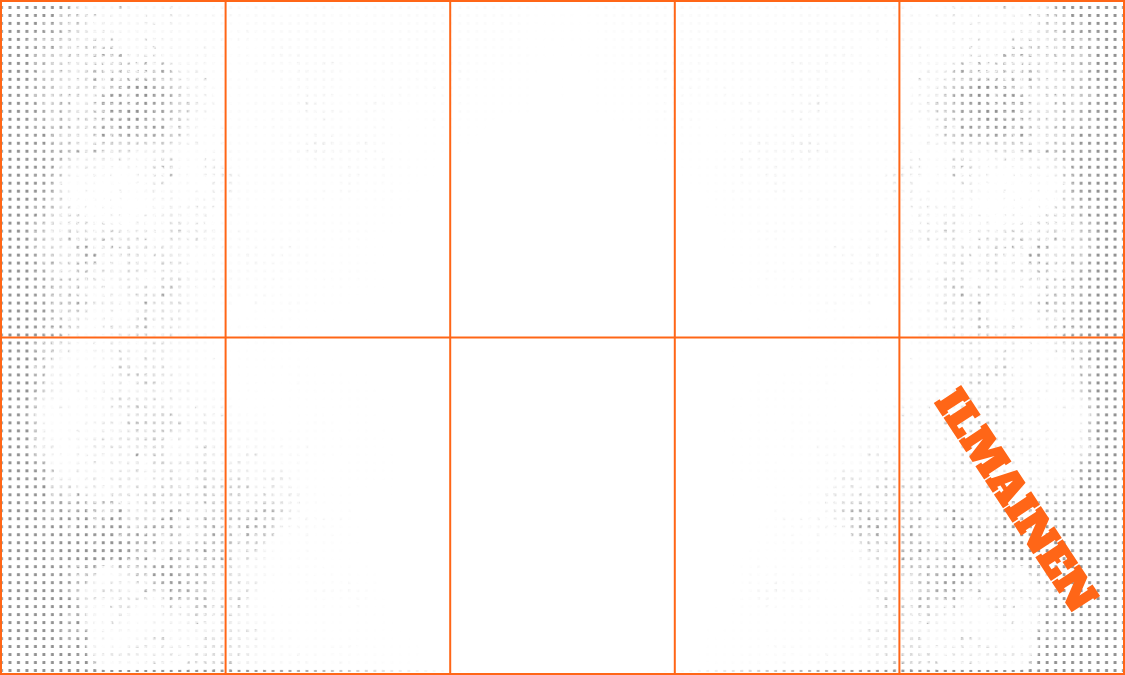
<style>
.page{position:relative;width:1125px;height:675px;background:#ffffff}
.page>*{position:absolute;margin:0}
.t1{font:42.1px "AlfaSlabOne-Regular";color:#ff6617}
</style>
<div class="page">
<p class="t1" style="left:933px;top:385px;width:168px;height:228px;rotate:57deg">ILMAINEN</p>
</div>
